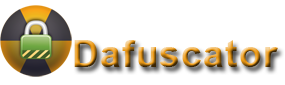
<style>
.page{position:relative;width:285px;height:85px;background:#ffffff}
.page>*{position:absolute;margin:0}
.t1{font:37.3px "Arial-BoldMT";letter-spacing:0.03em}
</style>
<div class="page">
<p class="t1" style="left:74px;top:40px;width:204px;height:27px">Dafuscator</p>
</div>
